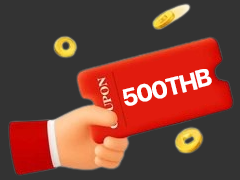
<style>
.page{position:relative;width:240px;height:180px;background:#333333}
.page>*{position:absolute;margin:0}
.t1{font:33.3px "FCIconicBold";letter-spacing:-0.01em;color:#ffffff}
</style>
<div class="page">
<p class="t1" style="left:122px;top:69px;width:90px;height:37px;rotate:-14deg">500THB</p>
</div>
